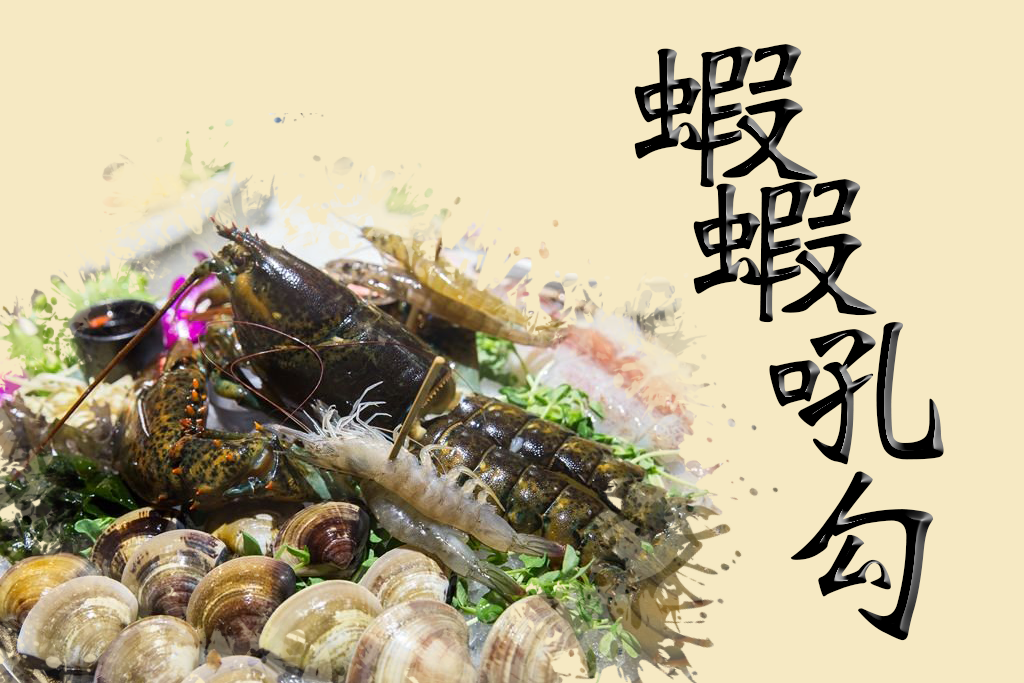
<style>
.page{position:relative;width:1024px;height:683px;background:#f6e9c3}
.page>*{position:absolute;margin:0}
.t1{font:200px "DFWeiBei-W7-WIN-BF";letter-spacing:0.03em;color:#000000}
</style>
<div class="page">
<p class="t1" style="left:634px;top:44px;width:184px;height:144px">蝦</p>
<p class="t1" style="left:693px;top:179px;width:184px;height:144px">蝦</p>
<p class="t1" style="left:769px;top:322px;width:175px;height:143px">吼</p>
<p class="t1" style="left:790px;top:471px;width:144px;height:170px">勾</p>
</div>
